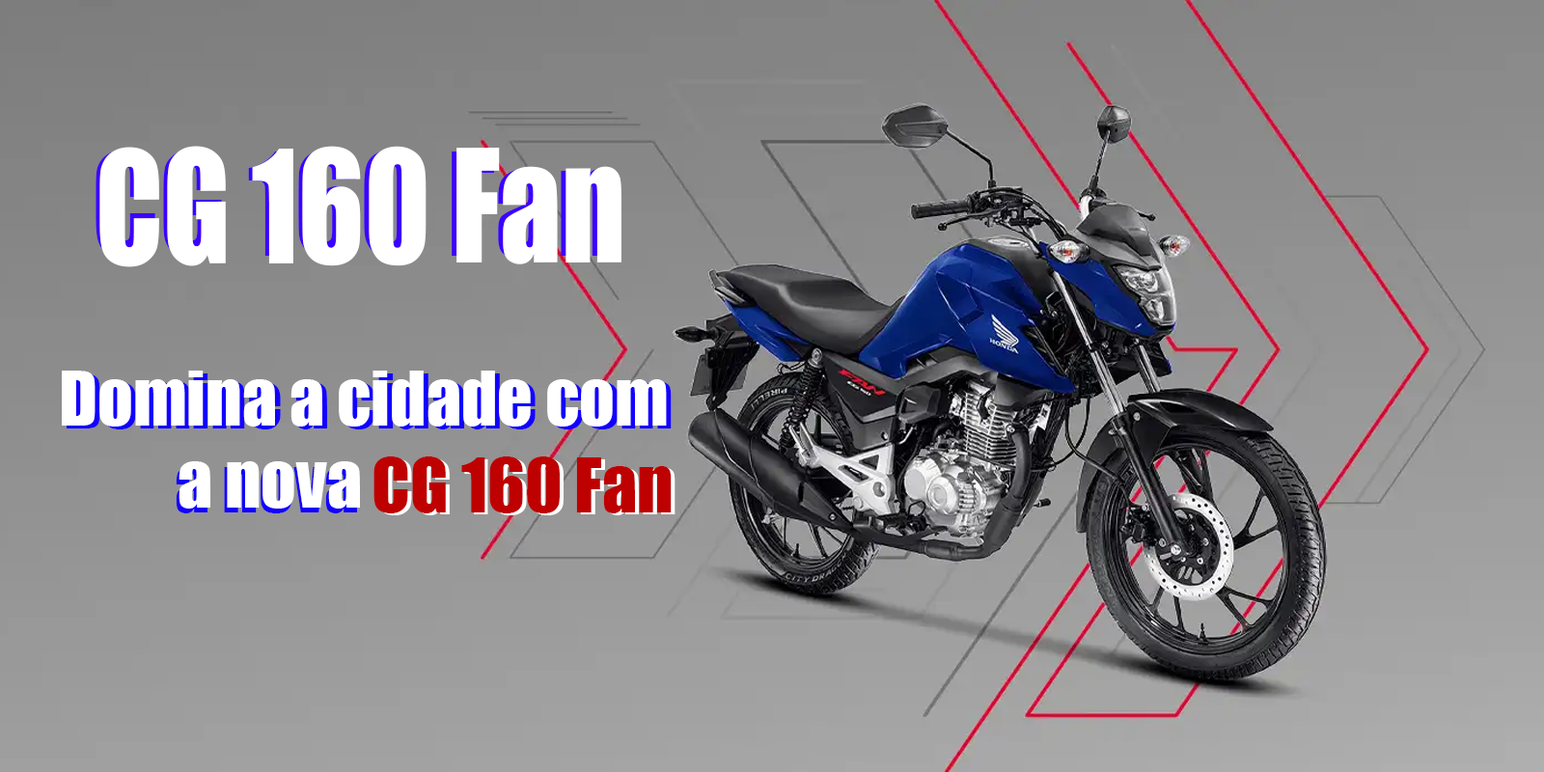
<style>
.page{position:relative;width:1544px;height:772px}
.page>*{position:absolute;margin:0}
.t1{font:131.5px "Impact";color:#ffffff;scale:0.93 1}
.t2{font:145.1px "Impact";color:#ffffff;scale:0.84 1}
.t3{font:69.5px "Impact";color:#ffffff}
.t4{font:69.5px "Impact";color:#be0000}
</style>
<div class="page">
<p class="t1" style="left:96px;top:150px;width:521px;height:108px">CG 160 Fan</p>
<p class="t2" style="left:99px;top:146px;width:523px;height:121px">CG 160 Fan</p>
<p class="t3" style="left:62px;top:371px;width:605px;height:56px">Domina a cidade com</p>
<p class="t3" style="left:179px;top:461px;width:181px;height:48px">a nova</p>
<p class="t4" style="left:377px;top:458px;width:299px;height:57px">CG 160 Fan</p>
</div>
